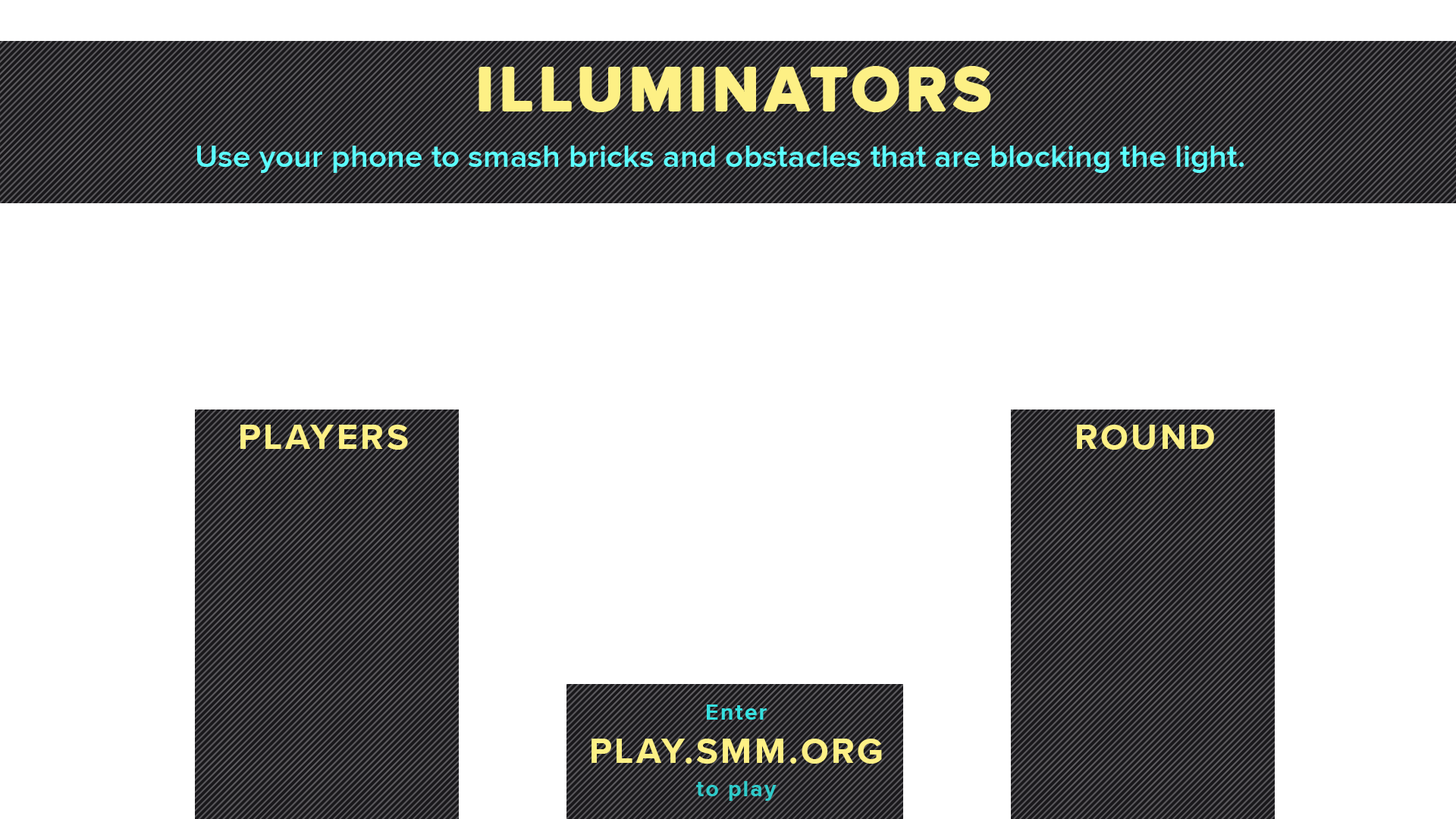
<style>
.page{position:relative;width:1456px;height:819px;background:#ffffff}
.page>*{position:absolute;margin:0}
.t1{font:63px "ProximaNova-Bold";letter-spacing:0.1em;color:#fdf085}
.t2{font:31.8px "ProximaNova-Semibold";letter-spacing:0.005em;color:#5bfdfe}
.t3{font:36.4px "ProximaNova-Bold";letter-spacing:0.075em;color:#fdf085}
.t4{font:22.7px "ProximaNova-Bold";letter-spacing:0.075em;color:#35e1e0}
.t5{font:22.7px/33.4px "ProximaNova-Bold";letter-spacing:0.075em;color:#2ecbca}
</style>
<div class="page">
<p class="t1" style="left:480px;top:67px;width:510px;height:44px">ILLUMINATORS</p>
<p class="t2" style="left:197px;top:146px;width:1047px;height:27px">Use your phone to smash bricks and obstacles that are blocking the light.</p>
<p class="t3" style="left:240px;top:425px;width:168px;height:25px">PLAYERS</p>
<p class="t3" style="left:1077px;top:425px;width:137px;height:25px">ROUND</p>
<p class="t3" style="left:591px;top:704px;width:291px;height:97px;text-align:center"><span class="t4">Enter<br></span>PLAY.SMM.ORG<br><span class="t5">to play</span></p>
</div>
